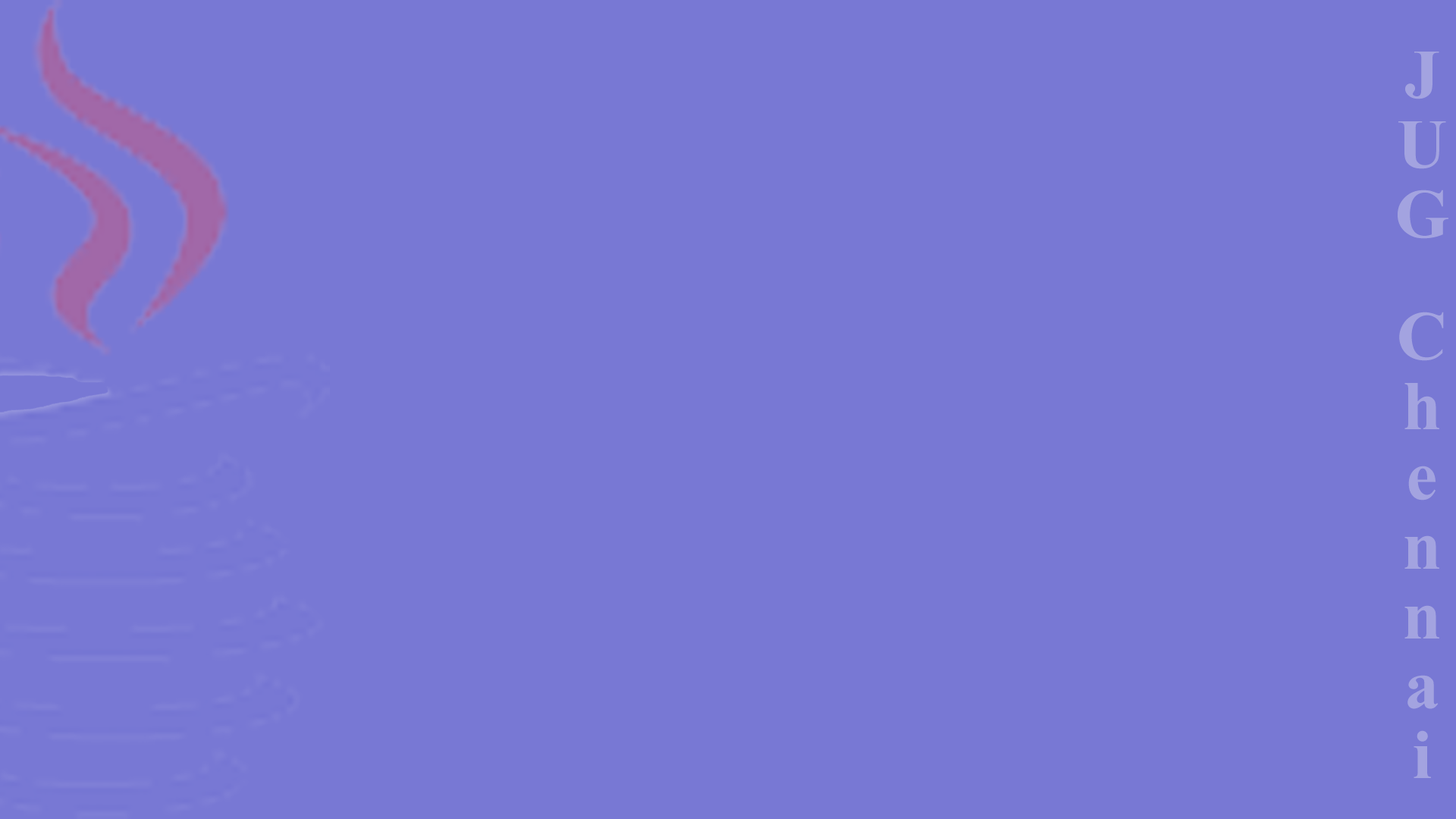
<style>
.page{position:relative;width:1456px;height:819px;background:#7878d4}
.page>*{position:absolute;margin:0}
.t1{font:69.8px "TimesNewRomanPS-BoldMT";color:#a3a3e0}
.t2{font:54.6px "TimesNewRomanPS-BoldMT";color:#a3a3e0}
</style>
<div class="page">
<p class="t1" style="left:1398px;top:52px;width:50px;height:726px;text-align:center"><span class="t2"> </span>JUG   Chennai</p>
</div>
